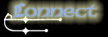
<style>
.page{position:relative;width:108px;height:37px;background:#000000}
.page>*{position:absolute;margin:0}
.t1{font:18px "Celtic-Normal";color:#94b2da}
.t2{font:18px "CathedralExtendedNormal";color:#94b2da}
</style>
<div class="page">
<p class="t1" style="left:13px;top:3px;width:84px;height:15px"><span class="t2">C</span>onnect</p>
</div>
